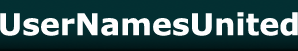
<style>
.page{position:relative;width:298px;height:51px;background:#032f32}
.page>*{position:absolute;margin:0}
.t1{font:30px "Verdana-Bold";color:#fefefe}
</style>
<div class="page">
<p class="t1" style="left:0px;top:12px;width:298px;height:24px">UserNamesUnited</p>
</div>
